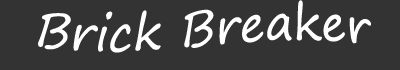
<style>
.page{position:relative;width:400px;height:70px;background:#333333}
.page>*{position:absolute;margin:0}
.t1{font:48px "SegoePrint";color:#ffffff}
</style>
<div class="page">
<p class="t1" style="left:38px;top:0px;width:333px;height:53px">Brick Breaker</p>
</div>
